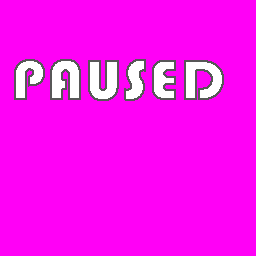
<style>
.page{position:relative;width:256px;height:256px;background:#ff00f6}
.page>*{position:absolute;margin:0}
.t1{font:59.7px "Bauhaus93";letter-spacing:0.02em;color:#ffffff;scale:1.03 1}
</style>
<div class="page">
<p class="t1" style="left:14px;top:59px;width:210px;height:42px">PAUSED</p>
</div>
